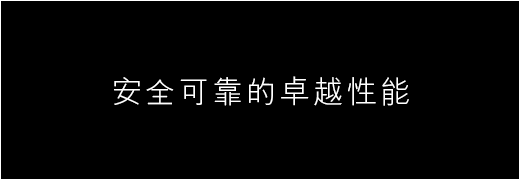
<style>
.page{position:relative;width:520px;height:180px;background:#000000}
.page>*{position:absolute;margin:0}
.t1{font:30.6px "MHeiHKS-Light";letter-spacing:0.1em;color:#ffffff}
</style>
<div class="page">
<p class="t1" style="left:114px;top:76px;width:295px;height:30px">安全可靠的卓越性能</p>
</div>
